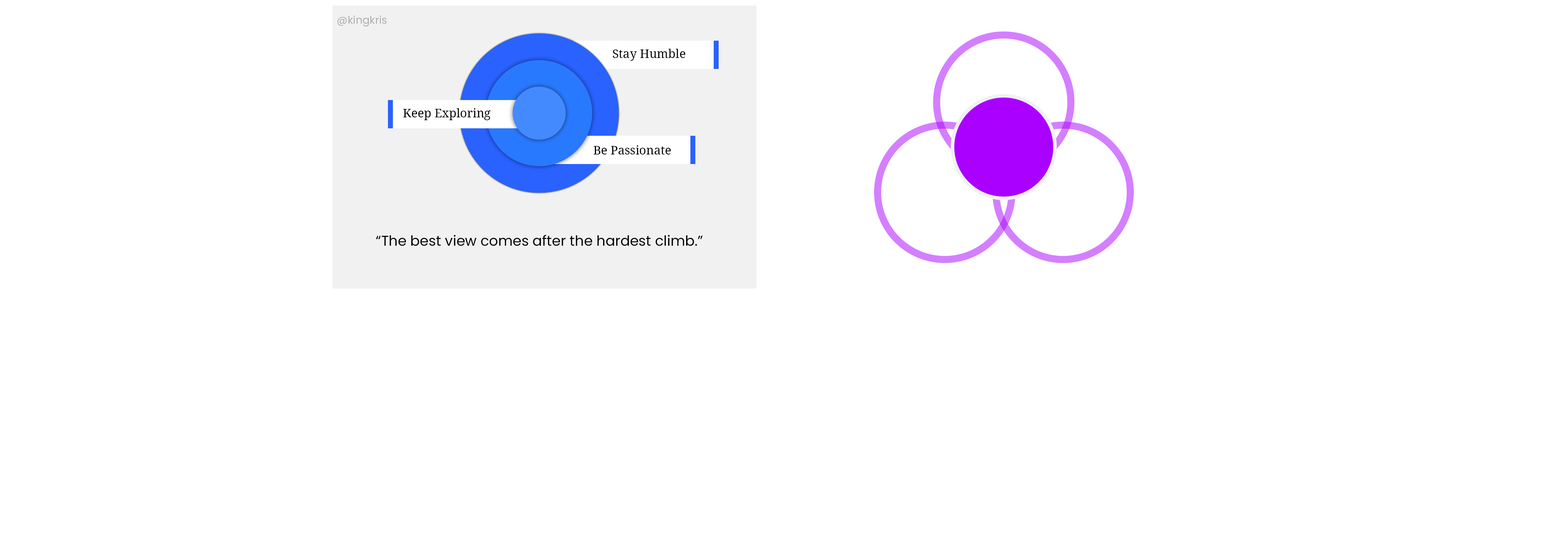
<style>
.page{position:relative;width:1568px;height:543px;background:#ffffff}
.page>*{position:absolute;margin:0}
.t1{font:10.6px "Poppins-Regular";color:#adadad}
.t2{font:12px "DroidSerif";color:#000000}
.t3{font:14.1px "Poppins-Regular";color:#000000}
</style>
<div class="page">
<p class="t1" style="left:337px;top:16px;width:50px;height:10px">@kingkris</p>
<p class="t2" style="left:613px;top:49px;width:72px;height:12px">Stay Humble</p>
<p class="t2" style="left:403px;top:108px;width:87px;height:12px">Keep Exploring</p>
<p class="t2" style="left:594px;top:145px;width:77px;height:9px">Be Passionate</p>
<p class="t3" style="left:376px;top:235px;width:327px;height:11px">“The best view comes after the hardest climb.”</p>
</div>
